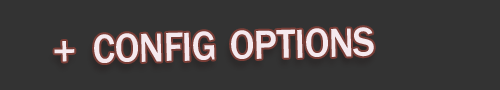
<style>
.page{position:relative;width:500px;height:90px;background:#333333}
.page>*{position:absolute;margin:0}
.t1{font:60px "FranklinGothic-Medium";letter-spacing:-0.01em;color:#f5e9ee;font-variant:small-caps;scale:0.92 1}
.t2{font:40px "FranklinGothic-Medium";color:#f5e9ee}
</style>
<div class="page">
<p class="t1" style="left:94px;top:27px;width:280px;height:36px;rotate:-2deg">config options</p>
<p class="t2" style="left:54px;top:41px;width:21px;height:21px;rotate:-2deg">+</p>
</div>
